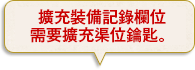
<style>
.page{position:relative;width:195px;height:70px;background:#f6efe8}
.page>*{position:absolute;margin:0}
.t1{font:16px/18px "GothicMB101Pr6N-Medium";color:#cc0000}
</style>
<div class="page">
<p class="t1" style="left:30px;top:9px;width:136px;height:34px;text-align:center">擴充裝備記錄欄位<br>需要擴充渠位鑰匙。</p>
</div>
